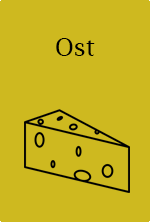
<style>
.page{position:relative;width:150px;height:222px;background:#ceb91f}
.page>*{position:absolute;margin:0}
.t1{font:24px "LucidaBright";color:#000000}
.t2{font:36px "LucidaBright";color:#caa947}
</style>
<div class="page">
<p class="t1" style="left:56px;top:38px;width:39px;height:18px"><span class="t2"><br></span>Ost</p>
</div>
